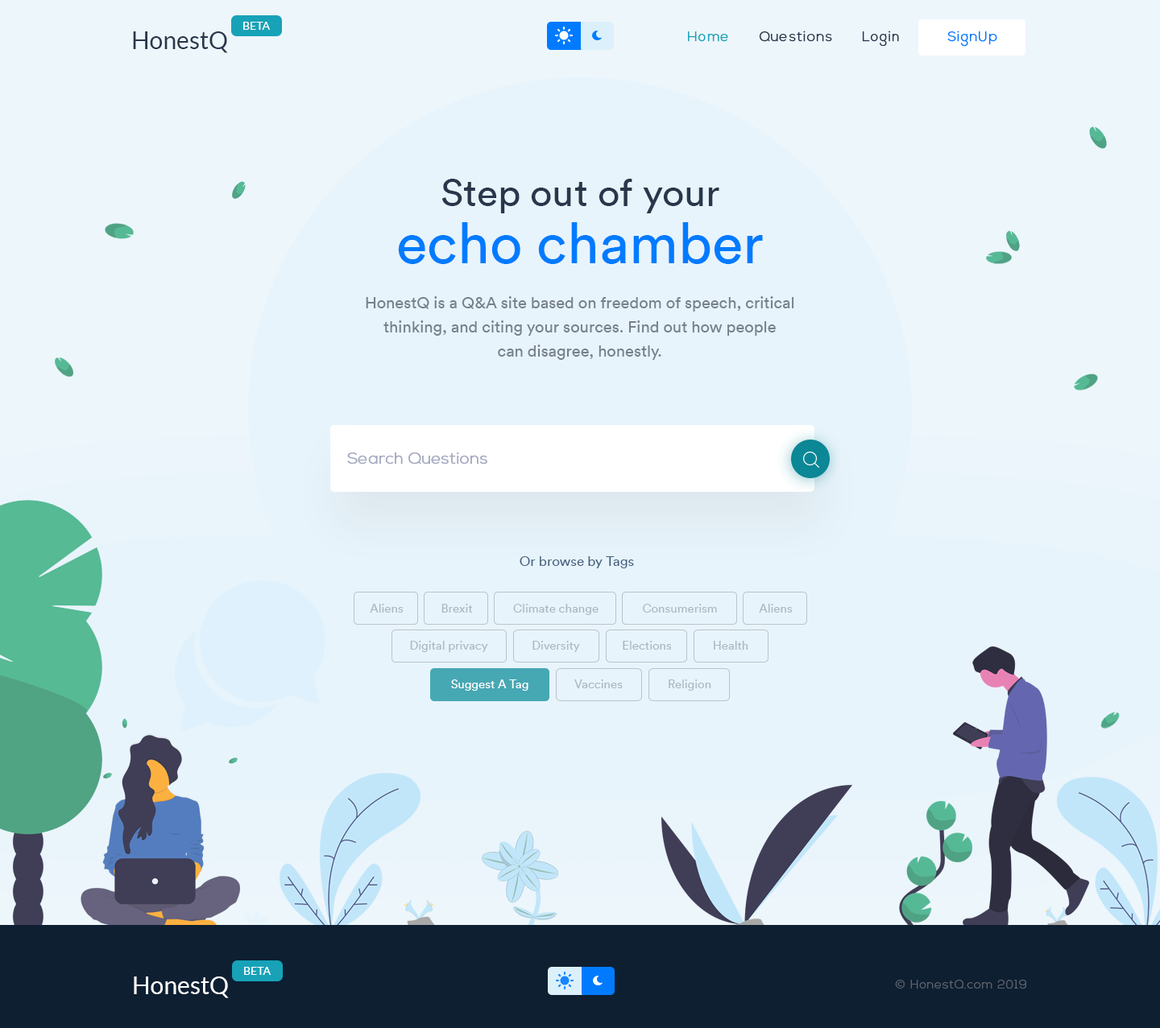
<style>
.page{position:relative;width:1160px;height:1028px;background:#e8f4fb}
.page>*{position:absolute;margin:0}
.t1{font:11.3px "Lato-Regular";color:#ffffff;text-transform:uppercase}
.t2{font:24.2px "Lato-Regular";color:#28374b}
.t3{font:13.7px "NexaLight";letter-spacing:0.05em;color:#28374b;font-weight:bold}
.t4{font:13.7px "NexaLight";letter-spacing:0.05em;color:#17a2b8;font-weight:bold}
.t5{font:13.7px "NexaLight";letter-spacing:0.05em;color:#007bff;font-weight:bold}
.t6{font:38.7px/57.2px "Circular-Book";color:#28374b}
.t7{font:57.2px/57.2px "Circular-Book";color:#007bff}
.t8{font:16.1px/24.2px "Circular-Book";color:#76818d}
.t9{font:16.1px "NexaLight";color:#a5aac2;font-weight:bold}
.t10{font:13.7px "Circular-Book";color:#456180}
.t11{font:12.1px "Circular-Book";color:#adb8c1}
.t12{font:12.1px "Circular-Book";color:#ffffff}
.t13{font:24.2px "Lato-Regular";color:#ffffff}
.t14{font:12.1px "NexaLight";letter-spacing:0.05em;color:#5d646d}
</style>
<div class="page">
<p class="t1" style="left:243px;top:22px;width:27px;height:8px">Beta</p>
<p class="t2" style="left:133px;top:31px;width:95px;height:22px">HonestQ</p>
<p class="t3" style="left:688px;top:31px;width:211px;height:15px"><span class="t4">Home    </span>  Questions      Login</p>
<p class="t5" style="left:947px;top:31px;width:50px;height:16px">SignUp</p>
<p class="t6" style="left:398px;top:179px;width:365px;height:85px;text-align:center">Step out of your<br><span class="t7">echo chamber</span></p>
<p class="t8" style="left:366px;top:296px;width:428px;height:64px;text-align:center">HonestQ is a Q&amp;A site based on freedom of speech, critical thinking, and citing your sources. Find out how people<br>can disagree, honestly.</p>
<p class="t9" style="left:347px;top:453px;width:140px;height:12px">Search Questions</p>
<p class="t10" style="left:519px;top:556px;width:115px;height:13px">Or browse by Tags</p>
<p class="t11" style="left:370px;top:604px;width:33px;height:9px">Aliens</p>
<p class="t11" style="left:441px;top:604px;width:31px;height:9px">Brexit</p>
<p class="t11" style="left:513px;top:604px;width:85px;height:11px">Climate change</p>
<p class="t11" style="left:643px;top:604px;width:74px;height:9px">Consumerism</p>
<p class="t11" style="left:759px;top:604px;width:33px;height:9px">Aliens</p>
<p class="t11" style="left:410px;top:641px;width:78px;height:11px">Digital privacy</p>
<p class="t11" style="left:532px;top:641px;width:48px;height:11px">Diversity</p>
<p class="t11" style="left:622px;top:641px;width:50px;height:9px">Elections</p>
<p class="t11" style="left:713px;top:641px;width:35px;height:9px">Health</p>
<p class="t12" style="left:451px;top:680px;width:77px;height:11px">Suggest A Tag</p>
<p class="t11" style="left:574px;top:680px;width:48px;height:9px">Vaccines</p>
<p class="t11" style="left:668px;top:680px;width:43px;height:11px">Religion</p>
<p class="t13" style="left:134px;top:977px;width:95px;height:22px">HonestQ</p>
<p class="t1" style="left:244px;top:967px;width:27px;height:8px">Beta</p>
<p class="t14" style="left:895px;top:980px;width:131px;height:10px">© HonestQ.com 2019</p>
</div>
